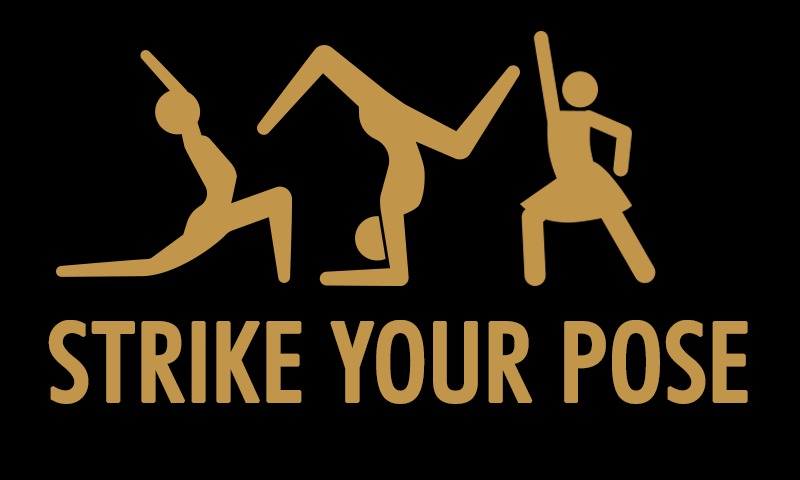
<style>
.page{position:relative;width:800px;height:480px;background:#000000}
.page>*{position:absolute;margin:0}
.t1{font:110.5px "FuturaBT-MediumCondensed";color:#c1964a;font-weight:bold}
</style>
<div class="page">
<p class="t1" style="left:48px;top:320px;width:700px;height:84px">STRIKE YOUR POSE</p>
</div>
